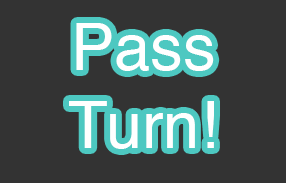
<style>
.page{position:relative;width:286px;height:183px;background:#333333}
.page>*{position:absolute;margin:0}
.t1{font:65px "Helvetica";color:#ffffff}
</style>
<div class="page">
<p class="t1" style="left:69px;top:23px;width:145px;height:126px;text-align:center">Pass<br>Turn!</p>
</div>
